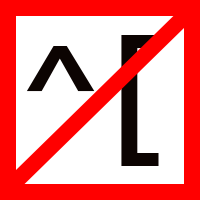
<style>
.page{position:relative;width:200px;height:200px;background:#ffffff}
.page>*{position:absolute;margin:0}
.t1{font:144px "Consolas-Bold";color:#0c0402}
</style>
<div class="page">
<p class="t1" style="left:26px;top:35px;width:133px;height:131px">^[</p>
</div>
